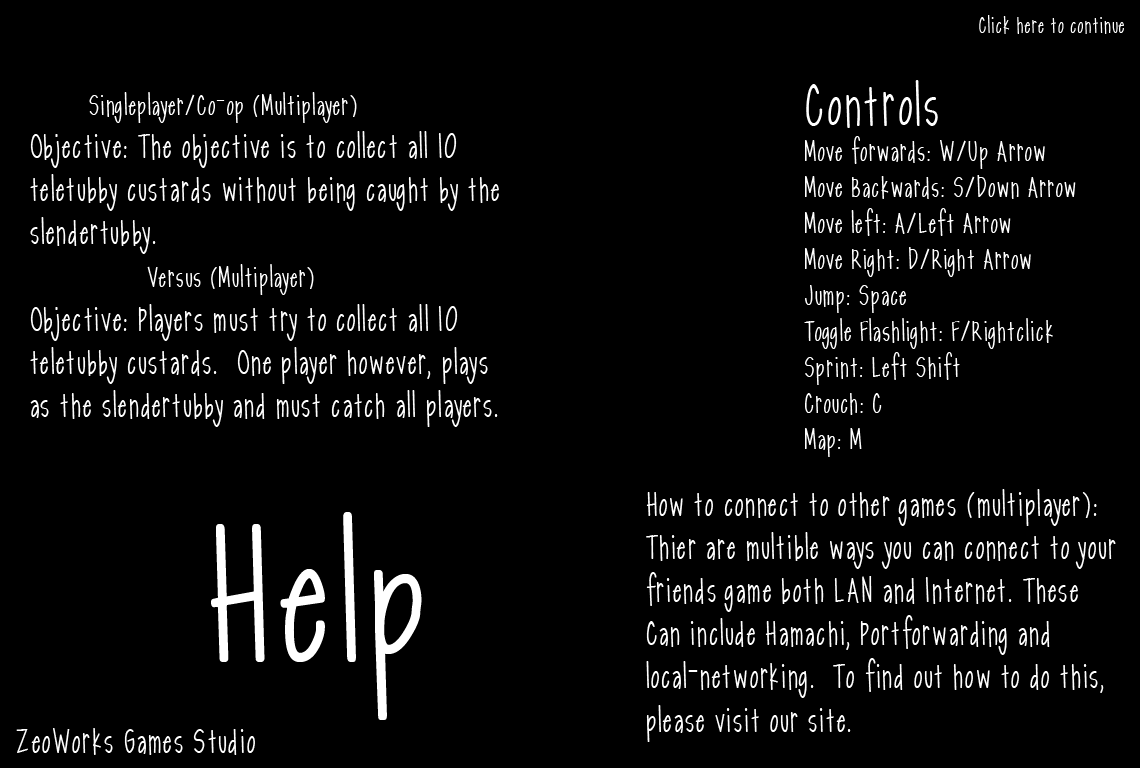
<style>
.page{position:relative;width:1140px;height:768px;background:#000000}
.page>*{position:absolute;margin:0}
.t1{font:24px "LDSlender";color:#ffffff}
.t2{font:30px "LDSlender";color:#ffffff}
.t3{font:60px "LDSlender";color:#ffffff}
.t4{font:36px "LDSlender";color:#ffffff}
.t5{font:200px "LDSlender";color:#ffffff}
</style>
<div class="page">
<p class="t1" style="left:979px;top:15px;width:145px;height:19px">Click here to continue</p>
<p class="t2" style="left:804px;top:80px;width:272px;height:377px"><span class="t3">Controls<br></span>Move forwards: W/Up Arrow<br>Move Backwards: S/Down Arrow<br>Move left: A/Left Arrow<br>Move Right: D/Right Arrow<br>Jump: Space<br>Toggle Flashlight: F/Rightclick<br>Sprint: Left Shift<br>Crouch: C<br>Map: M</p>
<p class="t4" style="left:30px;top:92px;width:469px;height:335px"><span class="t2">Singleplayer/Co-op (Multiplayer)<br></span>Objective: The objective is to collect all 10<br>teletubby custards without being caught by the<br>slendertubby.<br>              <span class="t2">Versus (Multiplayer)<br></span>Objective: Players must try to collect all 10<br>teletubby custards.  One player however, plays<br>as the slendertubby and must catch all players.</p>
<p class="t4" style="left:646px;top:489px;width:470px;height:253px">How to connect to other games (multiplayer):<br>Thier are multible ways you can connect to your<br>friends game both LAN and Internet. These<br>Can include Hamachi, Portforwarding and<br>local-networking.  To find out how to do this,<br>please visit our site.</p>
<p class="t5" style="left:211px;top:512px;width:211px;height:208px">Help</p>
<p class="t4" style="left:16px;top:728px;width:239px;height:27px">ZeoWorks Games Studio</p>
</div>
